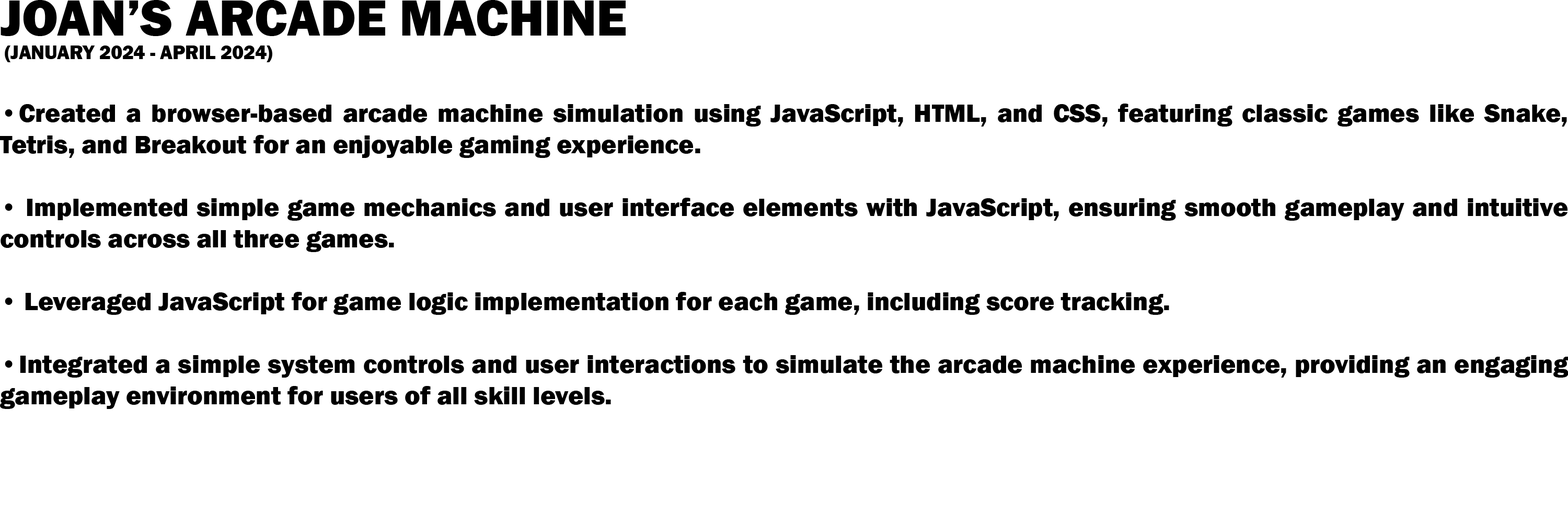
<style>
.page{position:relative;width:1568px;height:523px;background:#ffffff}
.page>*{position:absolute;margin:0}
.t1{font:26.1px "FranklinGothic-Heavy";color:#000000}
.t2{font:52.3px "FranklinGothic-Heavy";color:#000000}
.t3{font:19.6px "FranklinGothic-Heavy";color:#000000}
</style>
<div class="page">
<p class="t1" style="left:0px;top:0px;width:1569px;height:409px"><span class="t2">JOAN’S ARCADE MACHINE<br></span><span class="t3"> (JANUARY 2024 - APRIL 2024)<br></span><br>• Created a browser-based arcade machine simulation using JavaScript, HTML, and CSS, featuring classic games like Snake, Tetris, and Breakout for an enjoyable gaming experience.<br><br>• Implemented simple game mechanics and user interface elements with JavaScript, ensuring smooth gameplay and intuitive controls across all three games.<br><br>• Leveraged JavaScript for game logic implementation for each game, including score tracking.<br><br>• Integrated a simple system controls and user interactions to simulate the arcade machine experience, providing an engaging gameplay environment for users of all skill levels.</p>
</div>
